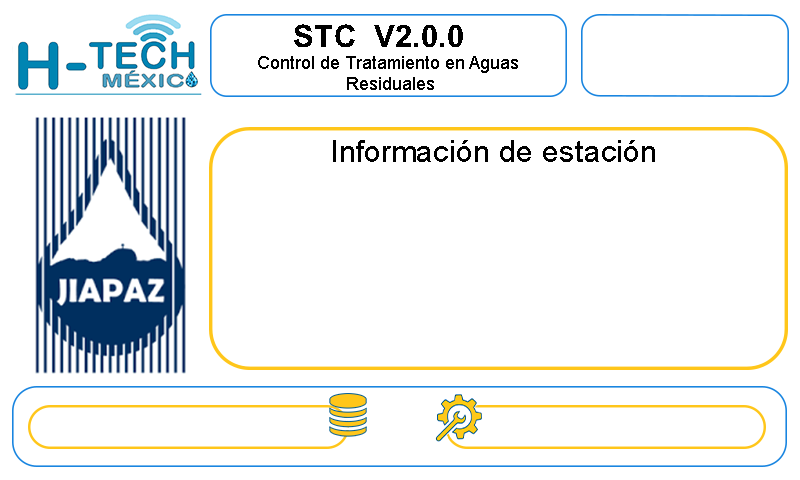
<style>
.page{position:relative;width:800px;height:480px;background:#ffffff}
.page>*{position:absolute;margin:0}
.t1{font:31.1px "Arial-BoldMT";color:#000000}
.t2{font:17.8px "ArialMT";color:#000000}
.t3{font:31.1px "ArialMT";color:#000000}
</style>
<div class="page">
<p class="t1" style="left:294px;top:24px;width:169px;height:23px">STC  V2.0.0</p>
<p class="t2" style="left:258px;top:56px;width:260px;height:34px;text-align:center">Control de Tratamiento en Aguas <br>Residuales</p>
<p class="t3" style="left:333px;top:140px;width:322px;height:22px">Información de estación</p>
</div>
